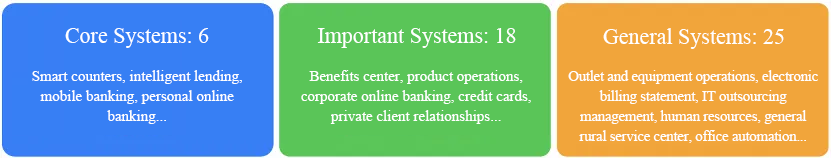
<style>
.page{position:relative;width:832px;height:158px;background:#5ac558}
.page>*{position:absolute;margin:0}
.t1{font:22px "TimesNewRomanPSMT";color:#ffffff}
.t2{font:15px/20px "TimesNewRomanPSMT";color:#ffffff}
.t3{font:15px/20px "TimesNewRomanPSMT";letter-spacing:-0.02em;color:#ffffff}
</style>
<div class="page">
<p class="t1" style="left:65px;top:28px;width:144px;height:20px">Core Systems: 6</p>
<p class="t1" style="left:317px;top:28px;width:199px;height:20px">Important Systems: 18</p>
<p class="t1" style="left:603px;top:28px;width:181px;height:21px">General Systems: 25</p>
<p class="t2" style="left:32px;top:70px;width:210px;height:54px;text-align:center">Smart counters, intelligent lending, mobile banking, personal online banking...</p>
<p class="t2" style="left:301px;top:70px;width:230px;height:54px;text-align:center">Benefits center, product operations, corporate online banking, credit cards, private client relationships...</p>
<p class="t3" style="left:568px;top:70px;width:250px;height:73px;text-align:center">Outlet and equipment operations, electronic billing statement, IT outsourcing management, human resources, general rural service center, office automation...</p>
</div>
